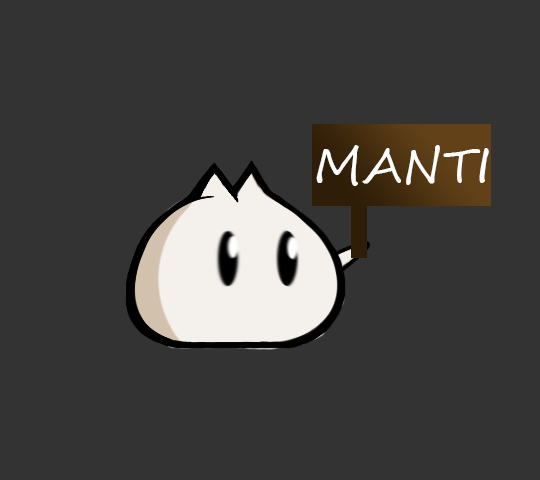
<style>
.page{position:relative;width:540px;height:480px;background:#333333}
.page>*{position:absolute;margin:0}
.t1{font:48px "SegoeScript";color:#ffffff}
</style>
<div class="page">
<p class="t1" style="left:316px;top:145px;width:173px;height:41px">MANTI</p>
</div>
